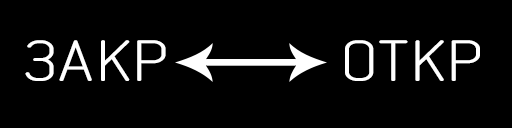
<style>
.page{position:relative;width:512px;height:128px;background:#000000}
.page>*{position:absolute;margin:0}
.t1{font:59.4px "Mipgost";color:#ffffff;scale:1.39 1}
</style>
<div class="page">
<p class="t1" style="left:25px;top:40px;width:141px;height:41px">ЗАКР</p>
<p class="t1" style="left:345px;top:40px;width:135px;height:41px">ОТКР</p>
</div>
